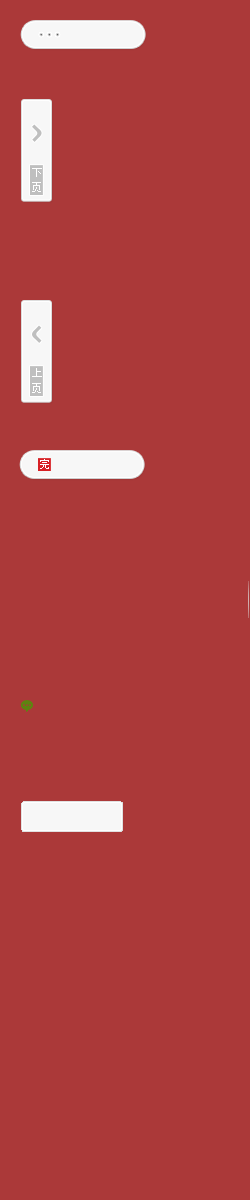
<style>
.page{position:relative;width:250px;height:1200px;background:#ab3939}
.page>*{position:absolute;margin:0}
.t1{font:11px "AdobeHeitiStd-Regular";letter-spacing:0.075em;color:#ffffff}
</style>
<div class="page">
<p class="t1" style="left:32px;top:168px;width:10px;height:9px">下</p>
<p class="t1" style="left:32px;top:182px;width:9px;height:10px">页</p>
<p class="t1" style="left:32px;top:368px;width:10px;height:9px">上</p>
<p class="t1" style="left:32px;top:383px;width:9px;height:10px">页</p>
</div>
